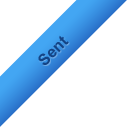
<style>
.page{position:relative;width:128px;height:128px;background:#ffffff}
.page>*{position:absolute;margin:0}
.t1{font:16px "Arial-BoldMT";color:#144485}
</style>
<div class="page">
<p class="t1" style="left:38px;top:35px;width:31px;height:30px;rotate:-45deg">Sent</p>
</div>
